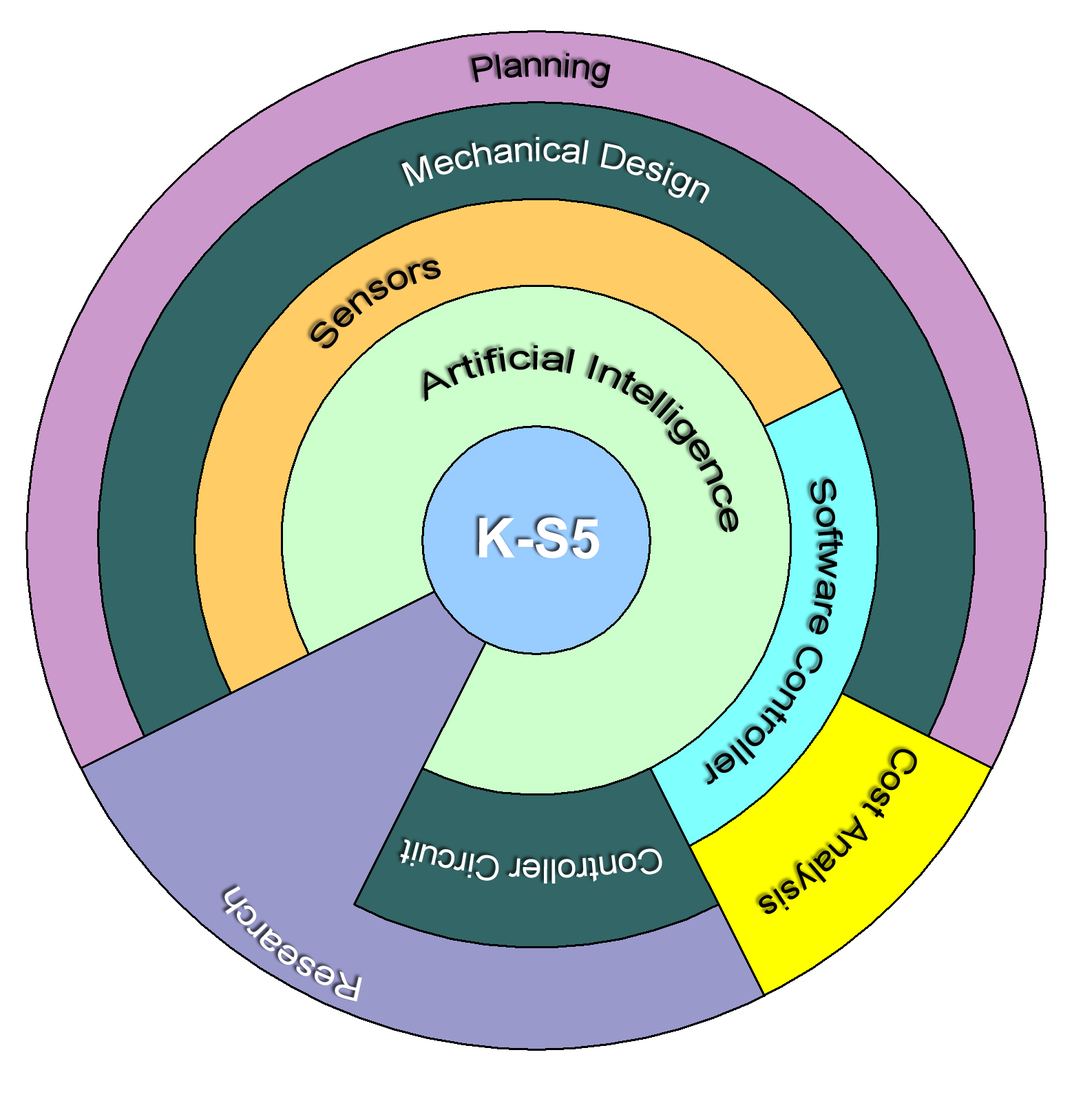
<style>
.page{position:relative;width:1083px;height:1101px;background:#ffffff}
.page>*{position:absolute;margin:0}
.t1{font:33px "ArialMT";color:#000000}
.t2{font:33px "ArialMT";color:#ffffff}
.t3{font:55.1px "Arial-BoldMT";color:#ffffff}
</style>
<div class="page">
<p class="t1" style="left:471px;top:53px;width:140px;height:35px">Planning</p>
<p class="t2" style="left:401px;top:137px;width:309px;height:67px;rotate:3deg">Mechanical Design</p>
<p class="t1" style="left:310px;top:260px;width:131px;height:89px;rotate:-33deg">Sensors</p>
<p class="t1" style="left:424px;top:345px;width:315px;height:188px;rotate:24deg">Artificial Intelligence</p>
<p class="t1" style="left:705px;top:479px;width:138px;height:306px;rotate:111deg">Software Controller</p>
<p class="t3" style="left:479px;top:518px;width:121px;height:42px">K-S5</p>
<p class="t1" style="left:759px;top:749px;width:158px;height:166px;rotate:132deg">Cost Analysis</p>
<p class="t2" style="left:400px;top:839px;width:262px;height:45px;rotate:-178deg">Controller Circuit</p>
<p class="t2" style="left:224px;top:887px;width:138px;height:115px;rotate:-144deg">Research</p>
</div>
